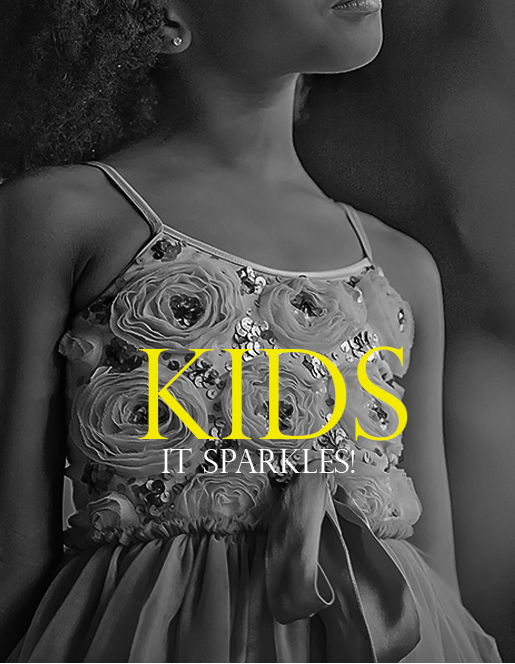
<style>
.page{position:relative;width:515px;height:664px}
.page>*{position:absolute;margin:0}
.t1{font:125px "PerpetuaTitlingMT-Light";letter-spacing:-0.005em;color:#f3ea00}
.t2{font:33.3px "PerpetuaTitlingMT-Light";letter-spacing:-0.005em;color:#ffffff}
</style>
<div class="page">
<p class="t1" style="left:139px;top:346px;width:269px;height:95px">kids</p>
<p class="t2" style="left:162px;top:448px;width:193px;height:25px">it sparkles!</p>
</div>
